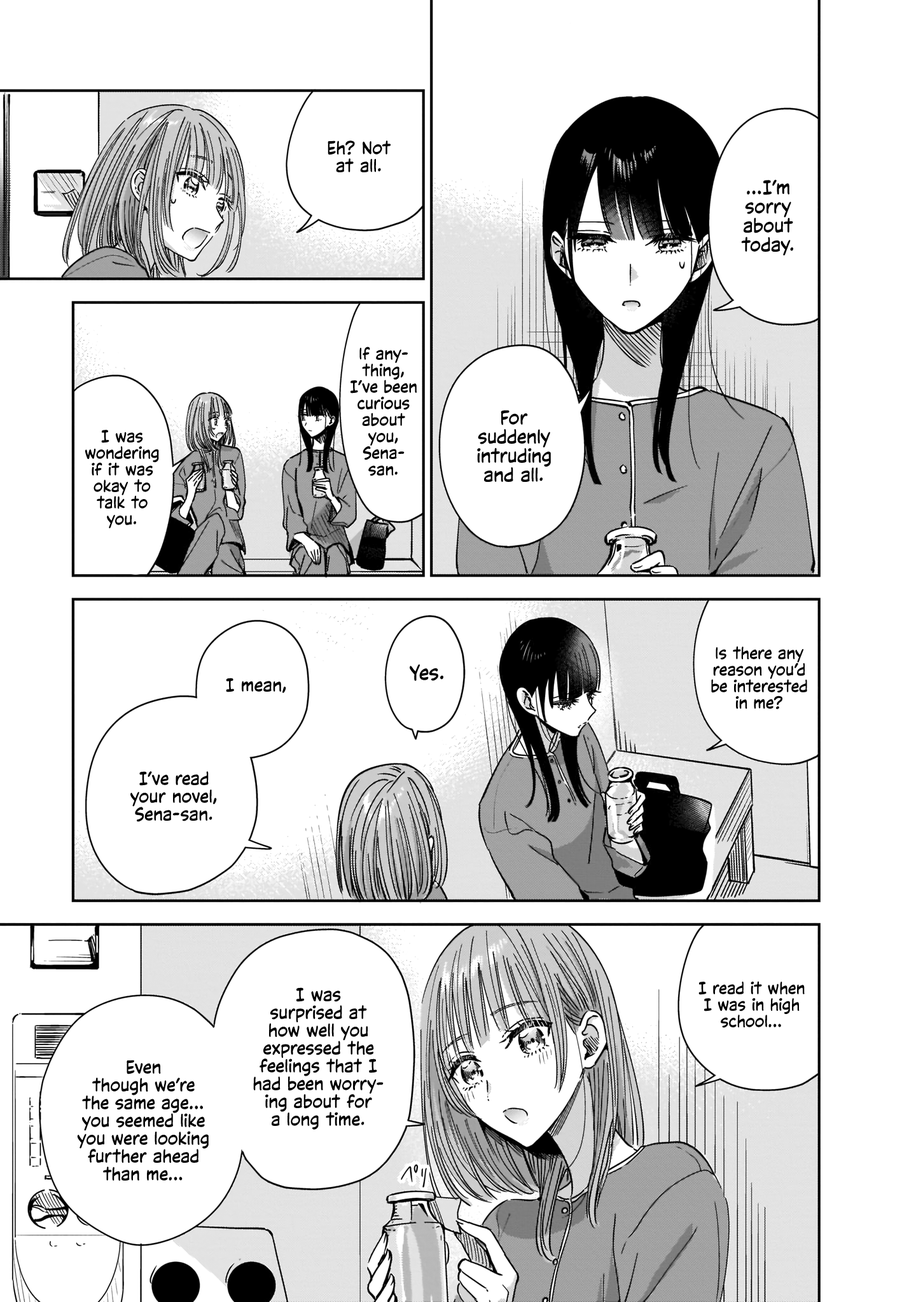
<style>
.page{position:relative;width:916px;height:1302px;background:#ffffff}
.page>*{position:absolute;margin:0}
.t1{font:17.8px "CCVictorySpeechLower-Regular";color:#000000}
.t2{font:19.1px "CCVictorySpeechLower-Regular";color:#000000}
.t3{font:16.5px "CCVictorySpeechLower-Regular";color:#000000}
.t4{font:20.3px "CCVictorySpeechLower-Regular";color:#000000}
</style>
<div class="page">
<p class="t1" style="left:327px;top:141px;width:63px;height:31px;text-align:center">Eh? Not<br>at all.</p>
<p class="t2" style="left:741px;top:179px;width:52px;height:77px;text-align:center">...I’m<br>sorry<br>about<br>today.</p>
<p class="t3" style="left:350px;top:347px;width:66px;height:129px;text-align:center">If any-<br>thing,<br>I’ve been<br>curious<br>about<br>you,<br>Sena-<br>san.</p>
<p class="t2" style="left:477px;top:410px;width:74px;height:72px;text-align:center">For<br>suddenly<br>intruding<br>and all.</p>
<p class="t3" style="left:85px;top:430px;width:74px;height:98px;text-align:center">I was<br>wondering<br>if it was<br>okay to<br>talk to<br>you.</p>
<p class="t3" style="left:711px;top:646px;width:96px;height:64px;text-align:center">Is there any<br>reason you’d<br>be interested<br>in me?</p>
<p class="t4" style="left:410px;top:664px;width:33px;height:17px">Yes.</p>
<p class="t1" style="left:226px;top:678px;width:60px;height:15px">I mean,</p>
<p class="t1" style="left:130px;top:771px;width:87px;height:51px;text-align:center">I’ve read<br>your novel,<br>Sena-san.</p>
<p class="t1" style="left:253px;top:988px;width:130px;height:142px;text-align:center">I was<br>surprised at<br>how well you<br>expressed the<br>feelings that I<br>had been worry-<br>ing about for<br>a long time.</p>
<p class="t3" style="left:698px;top:981px;width:106px;height:47px;text-align:center">I read it when<br>I was in high<br>school...</p>
<p class="t1" style="left:77px;top:1060px;width:132px;height:121px;text-align:center">Even<br>though we’re<br>the same age...<br>you seemed like<br>you were looking<br>further ahead<br>than me...</p>
</div>
